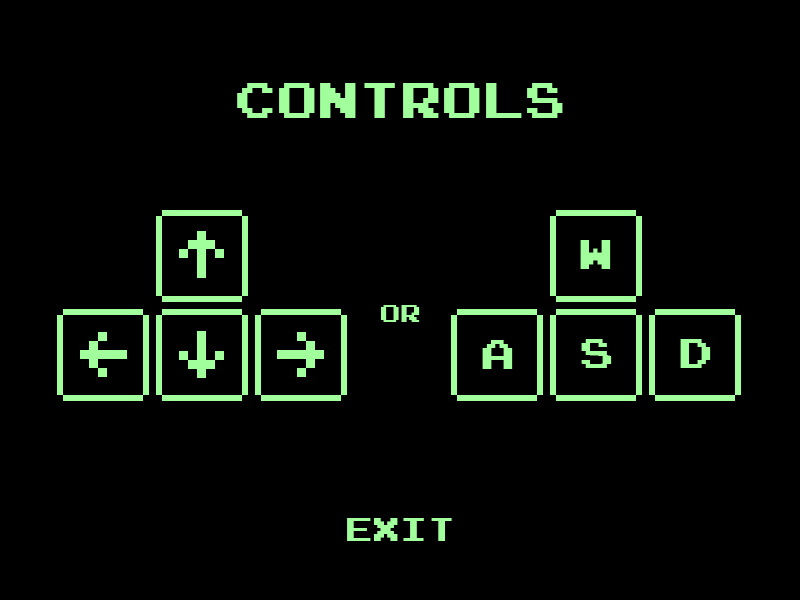
<style>
.page{position:relative;width:800px;height:600px;background:#000000}
.page>*{position:absolute;margin:0}
.t1{font:50px "JoystixMonospace-Regular";color:#a1ff9c}
.t2{font:33.3px "JoystixMonospace-Regular";color:#a1ff9c}
</style>
<div class="page">
<p class="t1" style="left:237px;top:83px;width:326px;height:35px">Controls</p>
<p class="t2" style="left:347px;top:518px;width:105px;height:23px">EXIT</p>
</div>
